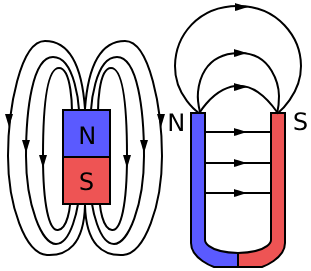
<style>
.page{position:relative;width:311px;height:271px;background:#ffffff}
.page>*{position:absolute;margin:0}
.t1{font:24px "DejaVuSans";color:#000000}
</style>
<div class="page">
<p class="t1" style="left:169px;top:113px;width:14px;height:18px">N</p>
<p class="t1" style="left:294px;top:112px;width:13px;height:19px">S</p>
<p class="t1" style="left:80px;top:126px;width:14px;height:18px">N</p>
<p class="t1" style="left:80px;top:172px;width:13px;height:19px">S</p>
</div>
